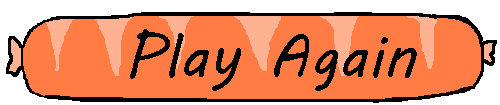
<style>
.page{position:relative;width:500px;height:105px;background:#ff7c44}
.page>*{position:absolute;margin:0}
.t1{font:60px "MVBoli";color:#000000}
</style>
<div class="page">
<p class="t1" style="left:130px;top:29px;width:287px;height:62px">Play Again</p>
</div>
